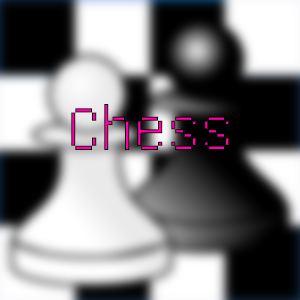
<style>
.page{position:relative;width:300px;height:300px}
.page>*{position:absolute;margin:0}
.t1{font:66.7px "GNUUnifontFull"}
</style>
<div class="page">
<p class="t1" style="left:71px;top:104px;width:159px;height:46px">Chess</p>
</div>
